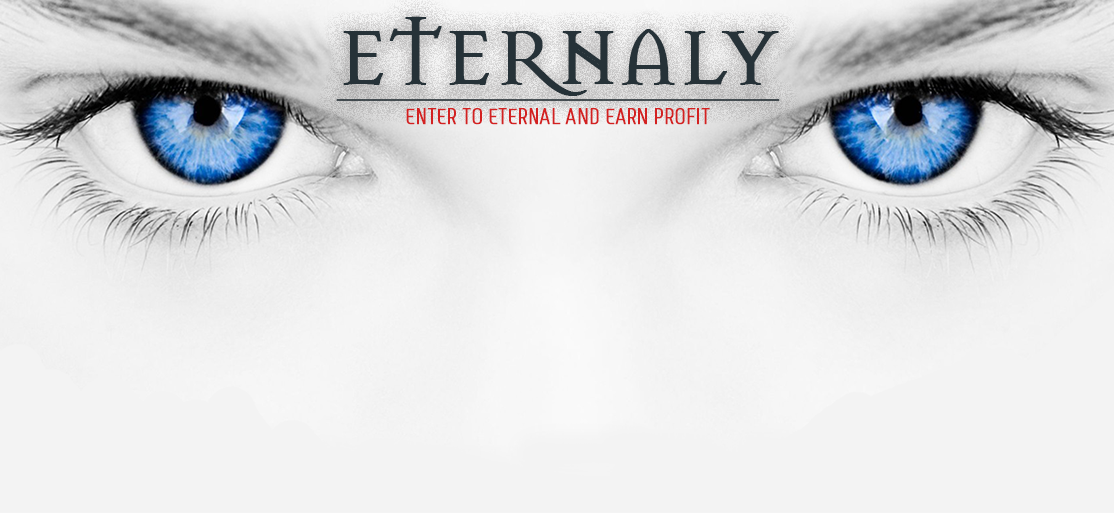
<style>
.page{position:relative;width:1114px;height:513px;background:#f3f3f3}
.page>*{position:absolute;margin:0}
.t1{font:82.6px "MasonChronicles";color:#263238;text-transform:uppercase;font-weight:bold;text-decoration:underline}
.t2{font:22px "Monitorica";color:#d32121;text-transform:uppercase;font-weight:bold}
</style>
<div class="page">
<p class="t1" style="left:336px;top:16px;width:444px;height:85px">Eternaly</p>
<p class="t2" style="left:406px;top:108px;width:304px;height:17px">Enter to eternal and earn profit</p>
</div>
